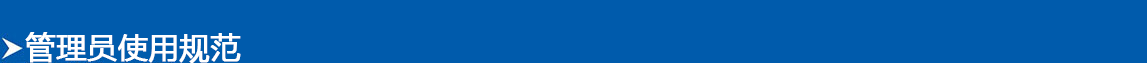
<style>
.page{position:relative;width:1147px;height:63px;background:#005bac}
.page>*{position:absolute;margin:0}
.t1{font:30px "MicrosoftYaHei";color:#ffffff;font-weight:bold}
</style>
<div class="page">
<p class="t1" style="left:25px;top:32px;width:216px;height:32px">管理员使用规范</p>
</div>
